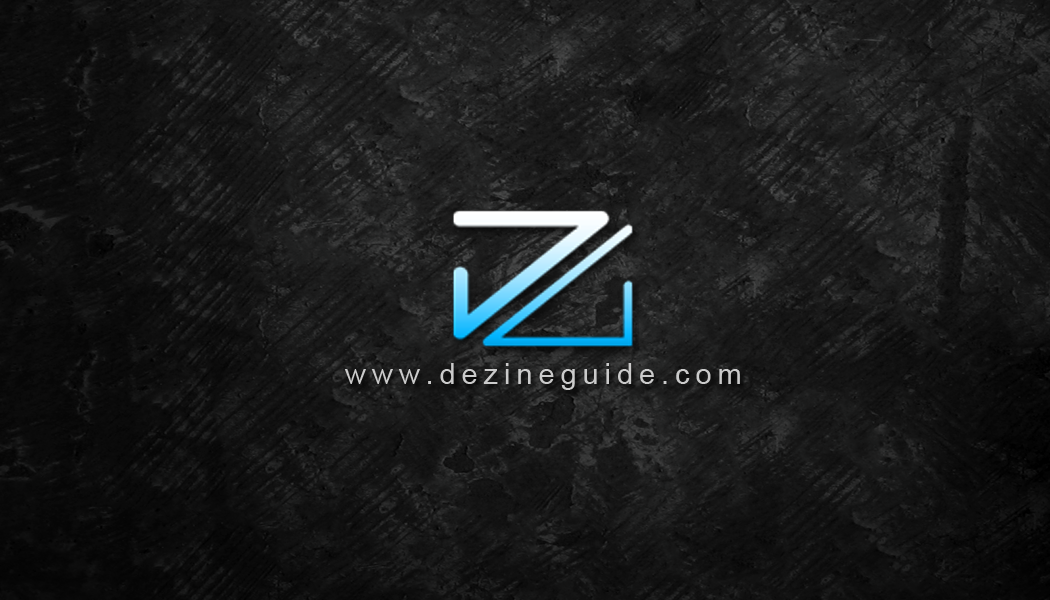
<style>
.page{position:relative;width:1050px;height:600px}
.page>*{position:absolute;margin:0}
.t1{font:29.2px "ArialMT";letter-spacing:0.2em;color:#cbcbcb}
</style>
<div class="page">
<p class="t1" style="left:344px;top:363px;width:396px;height:27px">www.dezineguide.com</p>
</div>
